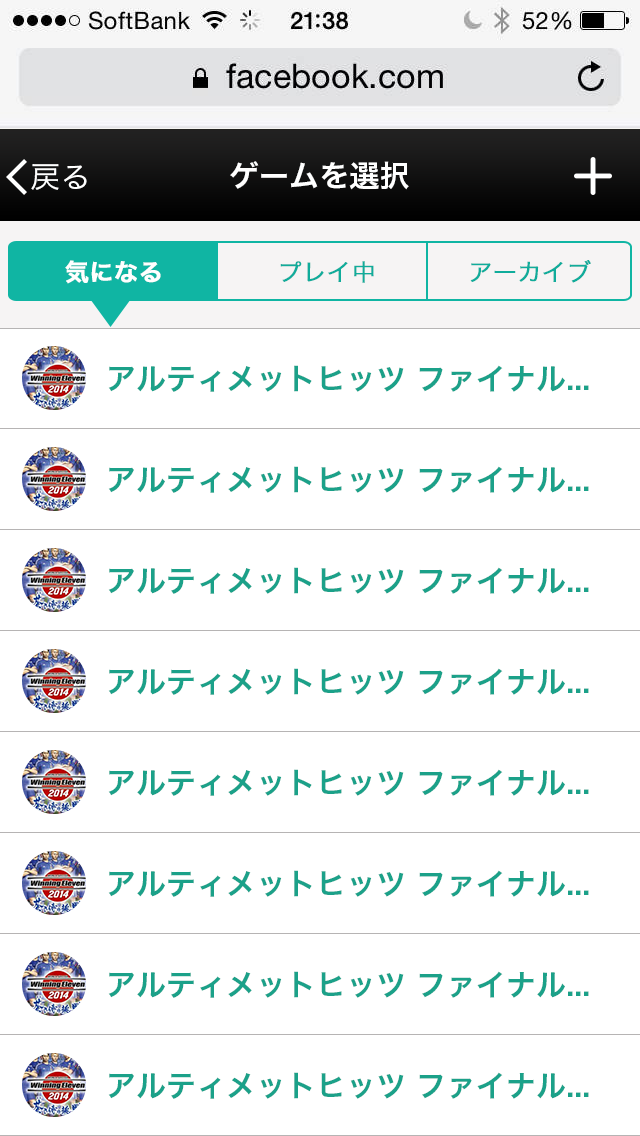
<style>
.page{position:relative;width:640px;height:1136px;background:#ffffff}
.page>*{position:absolute;margin:0}
.t1{font:30px "HiraKakuPro-W6";color:#ffffff}
.t2{font:30px "HiraKakuPro-W3";color:#ffffff}
.t3{font:24px "HiraKakuPro-W6";color:#ffffff;font-weight:bold}
.t4{font:24px "HiraKakuPro-W3";color:#10ac9b;font-weight:bold}
.t5{font:30px "HiraKakuPro-W6";color:#1ba189}
</style>
<div class="page">
<p class="t1" style="left:230px;top:161px;width:179px;height:29px">ゲームを選択</p>
<p class="t2" style="left:31px;top:164px;width:56px;height:26px">戻る</p>
<p class="t3" style="left:65px;top:260px;width:96px;height:24px">気になる</p>
<p class="t4" style="left:280px;top:261px;width:94px;height:22px">プレイ中</p>
<p class="t4" style="left:470px;top:260px;width:121px;height:23px">アーカイブ</p>
<p class="t5" style="left:108px;top:365px;width:481px;height:27px">アルティメットヒッツ ファイナル...</p>
<p class="t5" style="left:108px;top:466px;width:481px;height:27px">アルティメットヒッツ ファイナル...</p>
<p class="t5" style="left:108px;top:567px;width:481px;height:27px">アルティメットヒッツ ファイナル...</p>
<p class="t5" style="left:108px;top:668px;width:481px;height:27px">アルティメットヒッツ ファイナル...</p>
<p class="t5" style="left:108px;top:769px;width:481px;height:27px">アルティメットヒッツ ファイナル...</p>
<p class="t5" style="left:108px;top:870px;width:481px;height:27px">アルティメットヒッツ ファイナル...</p>
<p class="t5" style="left:108px;top:971px;width:481px;height:27px">アルティメットヒッツ ファイナル...</p>
<p class="t5" style="left:108px;top:1072px;width:481px;height:27px">アルティメットヒッツ ファイナル...</p>
</div>
